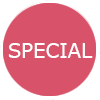
<style>
.page{position:relative;width:100px;height:100px;background:#d85269}
.page>*{position:absolute;margin:0}
.t1{font:19.7px "Verdana";color:#ffffff}
</style>
<div class="page">
<p class="t1" style="left:8px;top:43px;width:85px;height:15px">SPECIAL</p>
</div>
